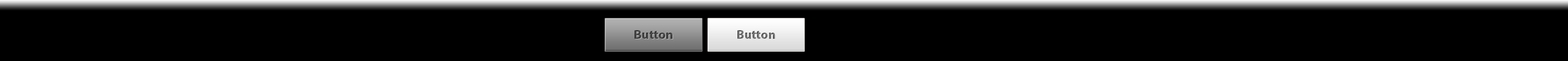
<style>
.page{position:relative;width:1568px;height:61px;background:#000000}
.page>*{position:absolute;margin:0}
.t1{font:12.7px "MyriadPro-Bold";color:#454545}
.t2{font:12.7px "MyriadPro-Bold"}
</style>
<div class="page">
<p class="t1" style="left:635px;top:30px;width:38px;height:9px">Button</p>
<p class="t2" style="left:737px;top:30px;width:38px;height:9px">Button</p>
</div>
